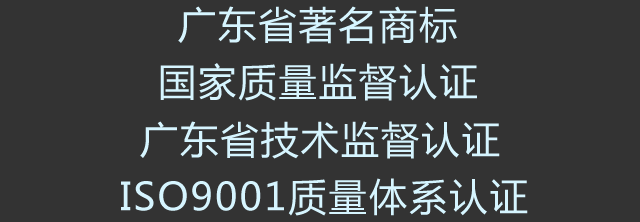
<style>
.page{position:relative;width:640px;height:222px;background:#333333}
.page>*{position:absolute;margin:0}
.t1{font:38.1px "MicrosoftYaHei";letter-spacing:0.057em;color:#d6f5ff}
</style>
<div class="page">
<p class="t1" style="left:178px;top:6px;width:279px;height:38px">广东省著名商标</p>
<p class="t1" style="left:160px;top:63px;width:317px;height:38px">国家质量监督认证</p>
<p class="t1" style="left:140px;top:121px;width:360px;height:38px">广东省技术监督认证</p>
<p class="t1" style="left:121px;top:178px;width:407px;height:38px">ISO9001质量体系认证</p>
</div>
